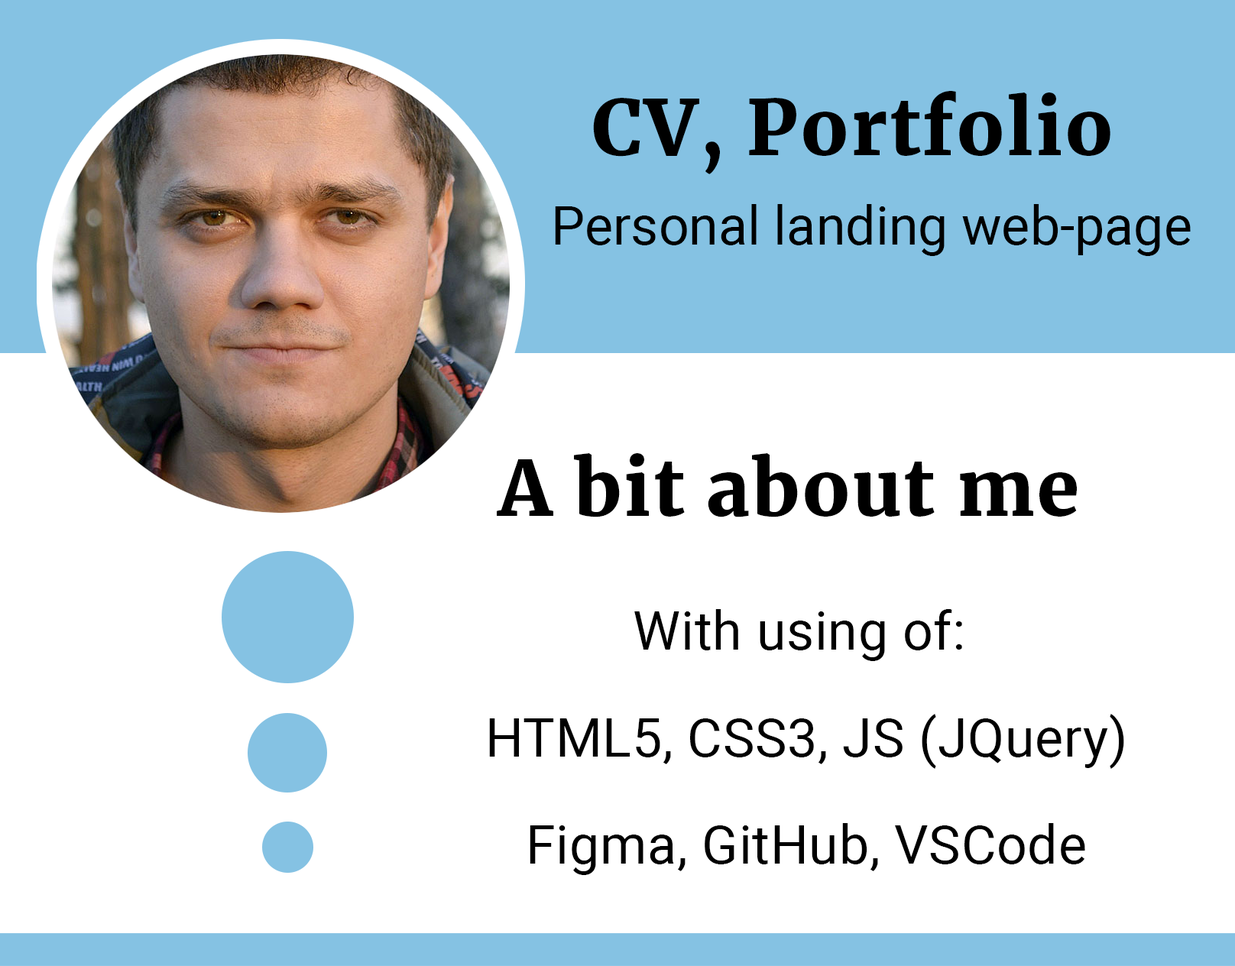
<style>
.page{position:relative;width:1235px;height:966px;background:#ffffff}
.page>*{position:absolute;margin:0}
.t1{font:76.4px "Merriweather-Black";letter-spacing:0.025em;color:#000000}
.t2{font:53.5px "Roboto-Regular";color:#000000}
.t3{font:53.5px/107px "Roboto-Regular";letter-spacing:0.01em;color:#000000}
</style>
<div class="page">
<p class="t1" style="left:593px;top:91px;width:517px;height:83px">CV, Portfolio</p>
<p class="t2" style="left:555px;top:204px;width:635px;height:52px">Personal landing web-page</p>
<p class="t1" style="left:497px;top:453px;width:580px;height:64px">A bit about me</p>
<p class="t3" style="left:489px;top:609px;width:635px;height:266px;text-align:center">With using of: <br>HTML5, CSS3, JS (JQuery)<br>Figma, GitHub, VSCode</p>
</div>
